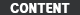
<style>
.page{position:relative;width:80px;height:15px;background:#333436}
.page>*{position:absolute;margin:0}
.t1{font:11px "HeadlineR-HM";letter-spacing:-0.02em;color:#ffffff}
</style>
<div class="page">
<p class="t1" style="left:10px;top:3px;width:60px;height:10px">CONTENT</p>
</div>
